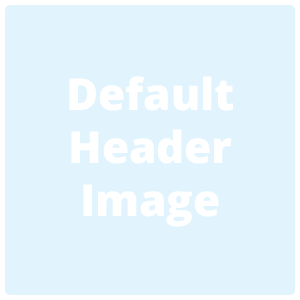
<style>
.page{position:relative;width:300px;height:300px;background:#e1f4fd}
.page>*{position:absolute;margin:0}
.t1{font:43.9px "OpenSans-Extrabold";color:#ffffff}
</style>
<div class="page">
<p class="t1" style="left:69px;top:76px;width:164px;height:151px;text-align:center">Default<br>Header<br>Image</p>
</div>
